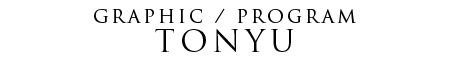
<style>
.page{position:relative;width:452px;height:61px;background:#ffffff}
.page>*{position:absolute;margin:0}
.t1{font:18px "TrajanPro-Regular";letter-spacing:0.16em;color:#000000}
.t2{font:30px "TrajanPro-Regular";letter-spacing:0.16em;color:#000000}
</style>
<div class="page">
<p class="t1" style="left:94px;top:8px;width:262px;height:15px">GRAPHIC / PROGRAM</p>
<p class="t2" style="left:155px;top:29px;width:138px;height:23px">TONYU</p>
</div>
